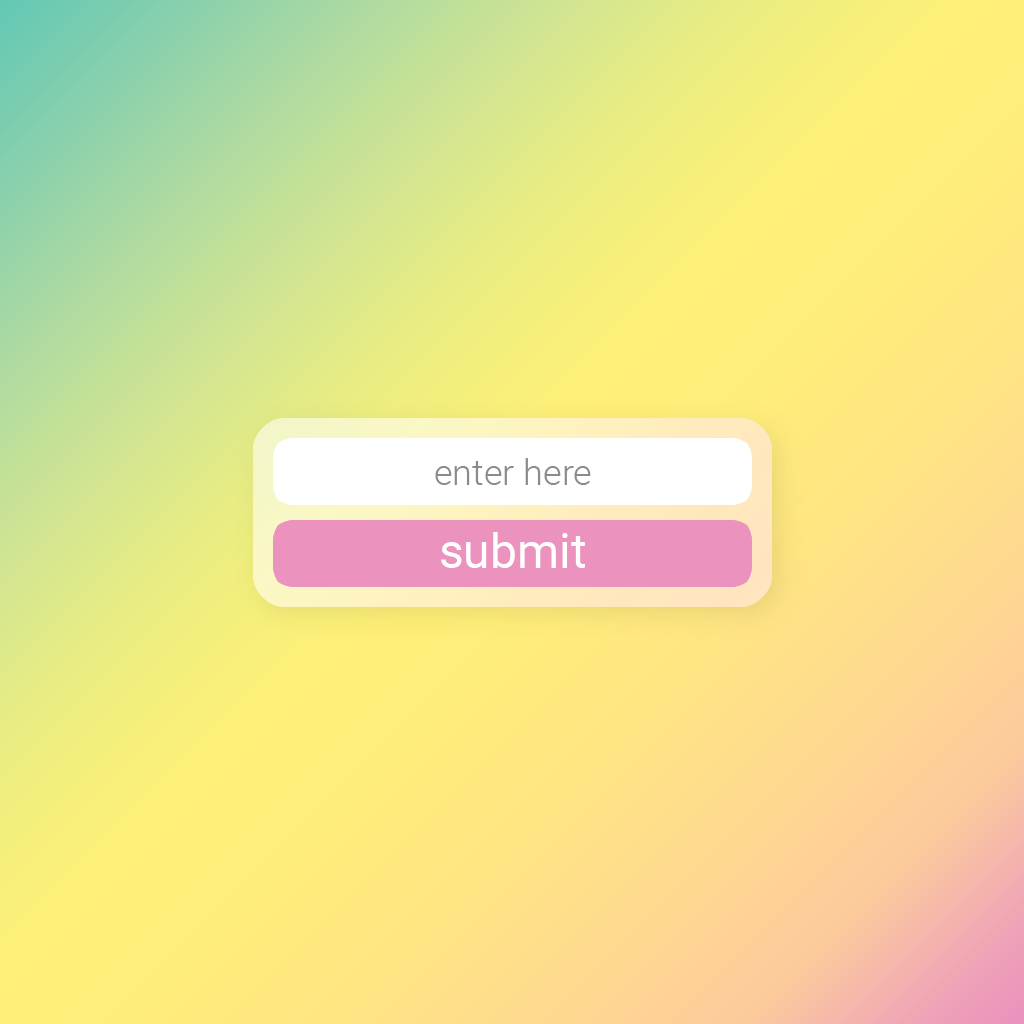
<style>
.page{position:relative;width:1024px;height:1024px}
.page>*{position:absolute;margin:0}
.t1{font:36px "Roboto-Light";color:#8b8b8b}
.t2{font:48px "Roboto-Regular";color:#ffffff}
</style>
<div class="page">
<p class="t1" style="left:435px;top:458px;width:156px;height:27px">enter here</p>
<p class="t2" style="left:441px;top:532px;width:144px;height:36px">submit</p>
</div>
